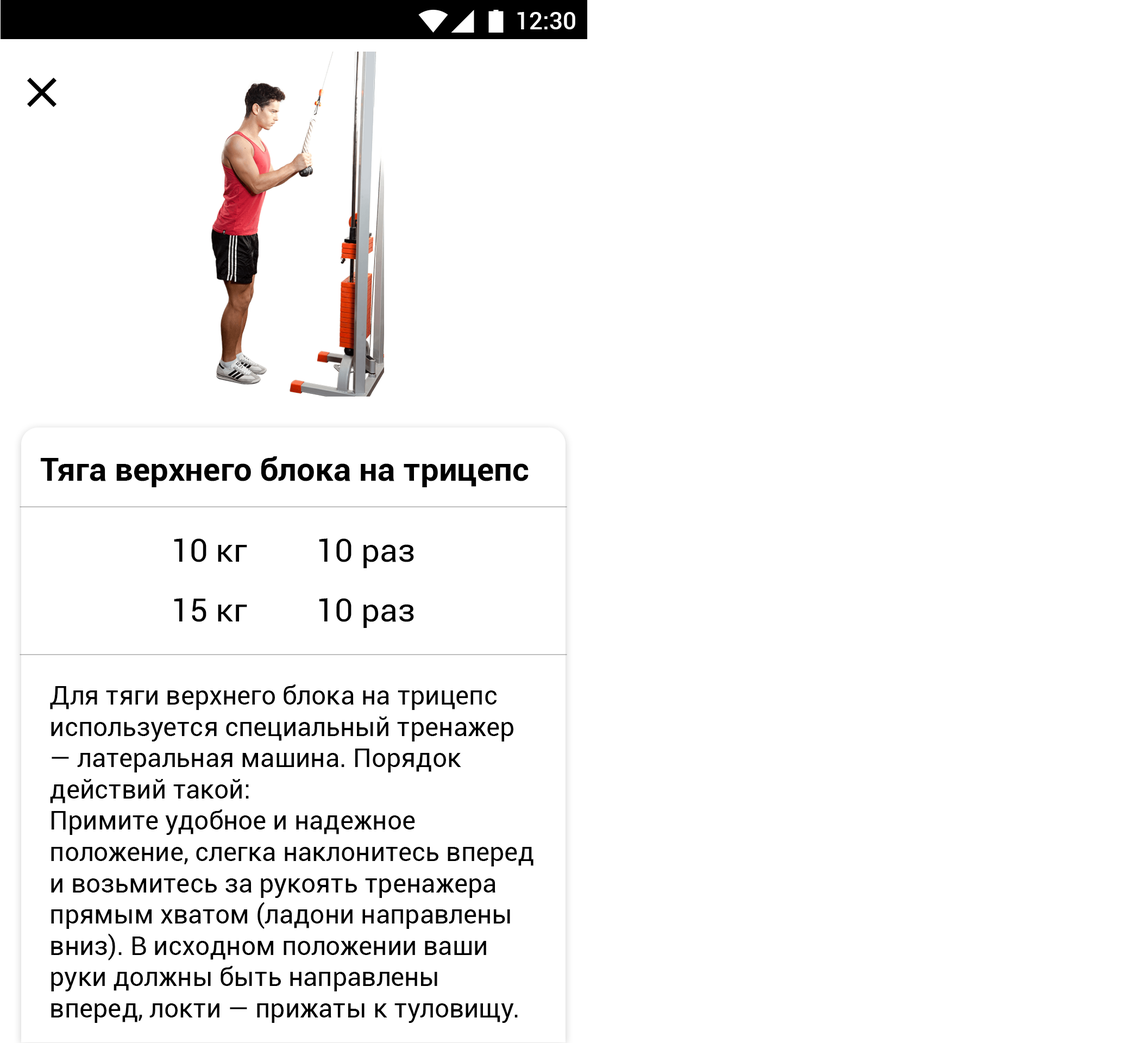
<style>
.page{position:relative;width:1143px;height:1043px;background:#ffffff}
.page>*{position:absolute;margin:0}
.t1{font:23.9px "Roboto-Medium";color:#ffffff}
.t2{font:32.6px "Roboto-Bold";color:#000000}
.t3{font:32.6px "Roboto-Regular";color:#000000}
.t4{font:26.1px "Roboto-Regular";color:#000000}
</style>
<div class="page">
<p class="t1" style="left:517px;top:12px;width:58px;height:17px">12:30</p>
<p class="t2" style="left:40px;top:456px;width:489px;height:31px">Тяга верхнего блока на трицепс</p>
<p class="t3" style="left:174px;top:538px;width:73px;height:24px">10 кг</p>
<p class="t3" style="left:319px;top:538px;width:95px;height:30px">10 раз</p>
<p class="t3" style="left:174px;top:598px;width:73px;height:24px">15 кг</p>
<p class="t3" style="left:319px;top:598px;width:95px;height:30px">10 раз</p>
<p class="t4" style="left:50px;top:685px;width:484px;height:338px">Для тяги верхнего блока на трицепс <br>используется специальный тренажер — латеральная машина. Порядок <br>действий такой:<br>Примите удобное и надежное <br>положение, слегка наклонитесь вперед <br>и возьмитесь за рукоять тренажера <br>прямым хватом (ладони направлены <br>вниз). В исходном положении ваши руки должны быть направлены вперед, локти — прижаты к туловищу.</p>
</div>
